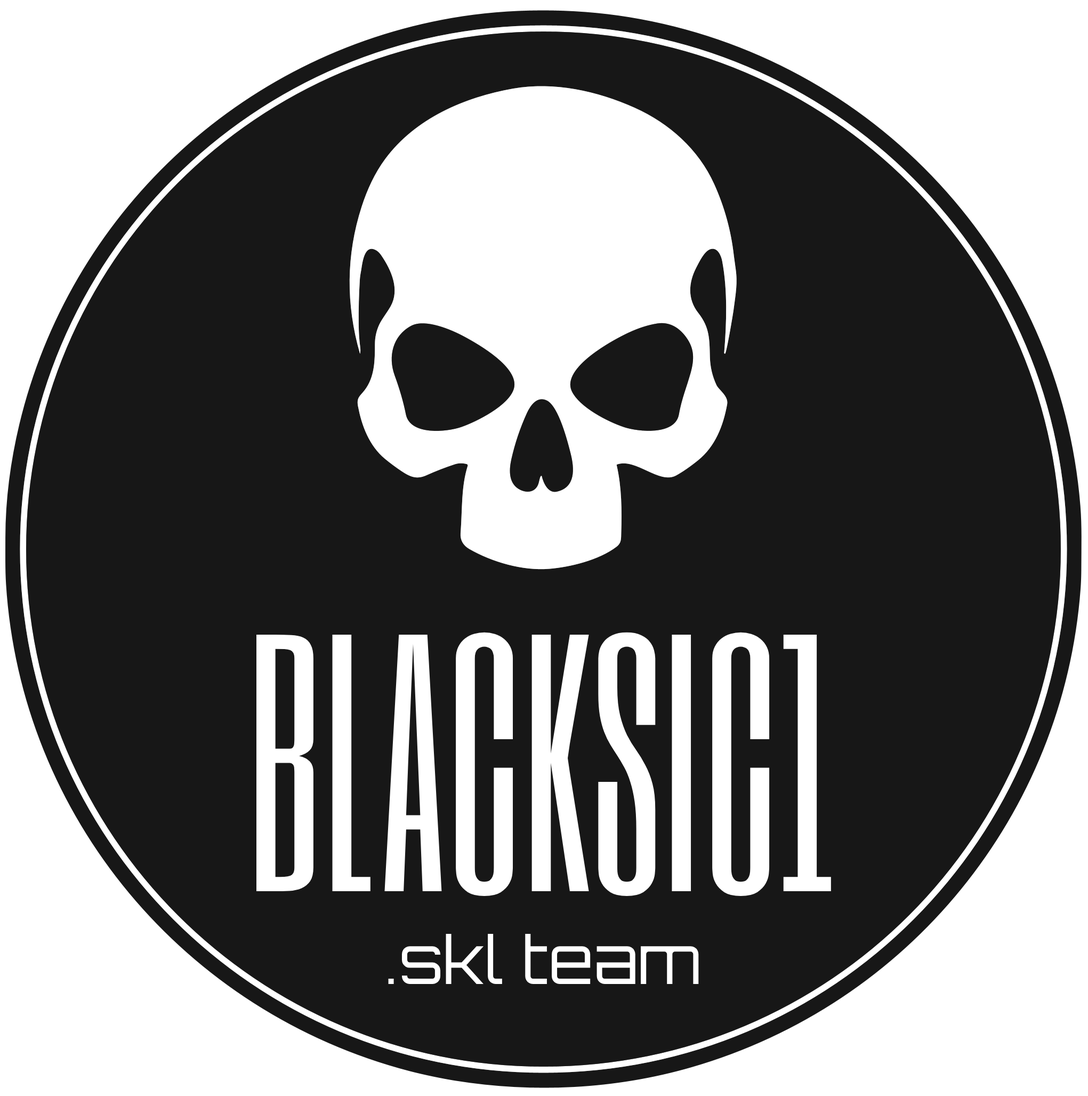
<style>
.page{position:relative;width:1088px;height:1096px;background:#171717}
.page>*{position:absolute;margin:0}
.t1{font:304px "SixCaps";color:#ffffff}
.t2{font:65.1px "Orbitron-Regular";color:#ffffff}
</style>
<div class="page">
<p class="t1" style="left:256px;top:632px;width:575px;height:264px">BLACKSIC1</p>
<p class="t2" style="left:388px;top:934px;width:311px;height:50px">.skl team</p>
</div>
